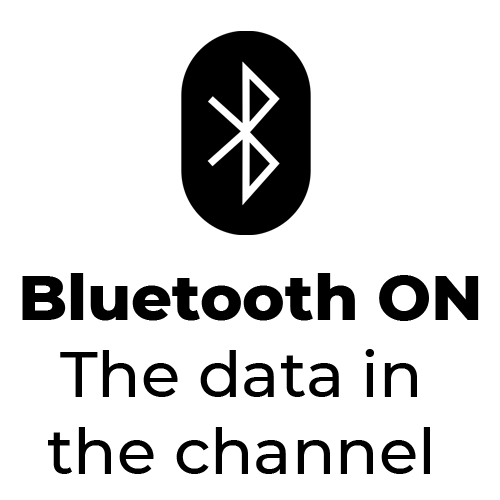
<style>
.page{position:relative;width:500px;height:500px;background:#ffffff}
.page>*{position:absolute;margin:0}
.t1{font:64px "Montserrat-Medium";color:#000000}
.t2{font:64px "Montserrat-ExtraBold";color:#000000}
</style>
<div class="page">
<p class="t1" style="left:22px;top:273px;width:457px;height:201px;text-align:center"><span class="t2">Bluetooth ON<br></span>The data in <br>the channel</p>
</div>
